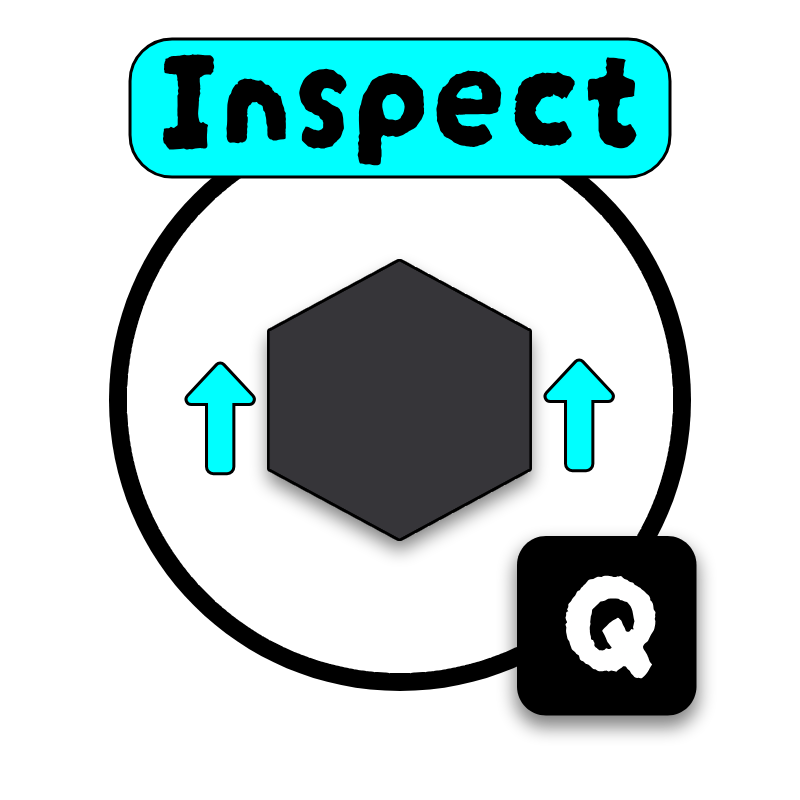
<style>
.page{position:relative;width:800px;height:800px;background:#ffffff}
.page>*{position:absolute;margin:0}
.t1{font:150px "DarumadropOne-Regular";color:#000000}
.t2{font:150px "DarumadropOne-Regular";color:#ffffff}
</style>
<div class="page">
<p class="t1" style="left:162px;top:54px;width:475px;height:112px">Inspect</p>
<p class="t2" style="left:565px;top:575px;width:91px;height:104px">Q</p>
</div>
